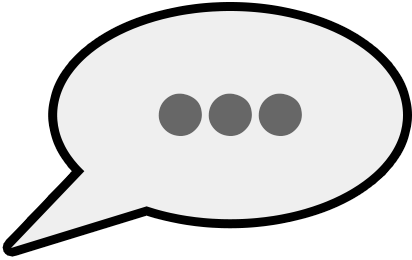
<style>
.page{position:relative;width:412px;height:260px;background:#efefef}
.page>*{position:absolute;margin:0}
.t1{font:201.3px "ARCO-Typography-Regular";color:#676767}
</style>
<div class="page">
<p class="t1" style="left:158px;top:93px;width:144px;height:43px">...</p>
</div>
